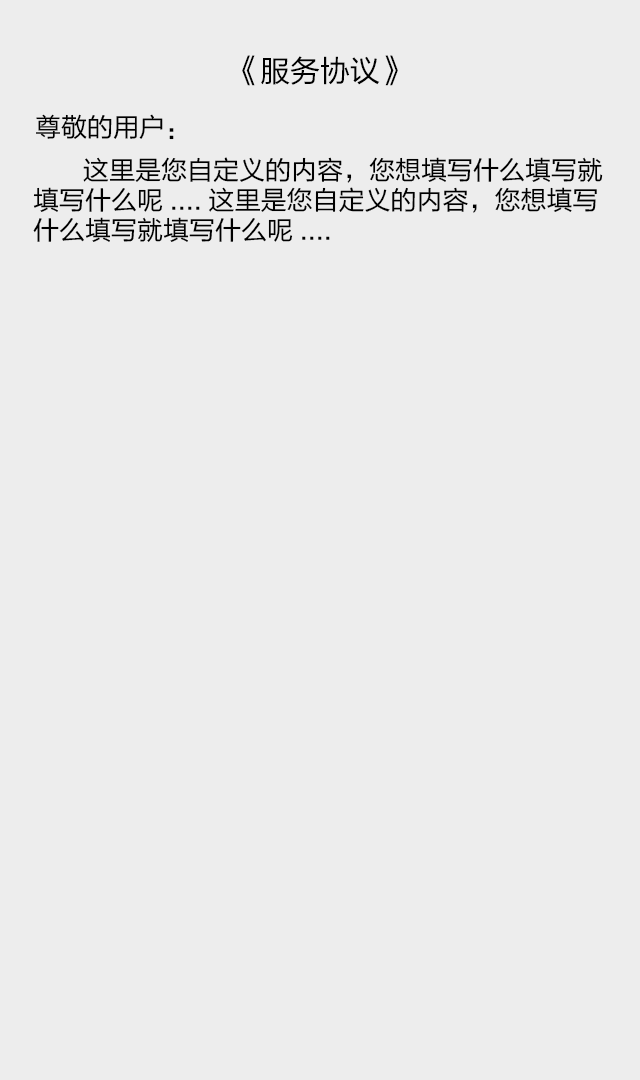
<style>
.page{position:relative;width:640px;height:1080px;background:#ededed}
.page>*{position:absolute;margin:0}
.t1{font:30px "FZLTHJW--GB1-0";color:#000000}
.t2{font:26px "FZLTHJW--GB1-0";color:#000000}
.t3{font:26px/30px "FZLTHJW--GB1-0";color:#000000}
</style>
<div class="page">
<p class="t1" style="left:242px;top:55px;width:156px;height:31px">《服务协议》</p>
<p class="t2" style="left:36px;top:114px;width:138px;height:26px">尊敬的用户：</p>
<p class="t3" style="left:33px;top:157px;width:570px;height:85px">这里是您自定义的内容，您想填写什么填写就填写什么呢....这里是您自定义的内容，您想填写什么填写就填写什么呢....</p>
</div>
